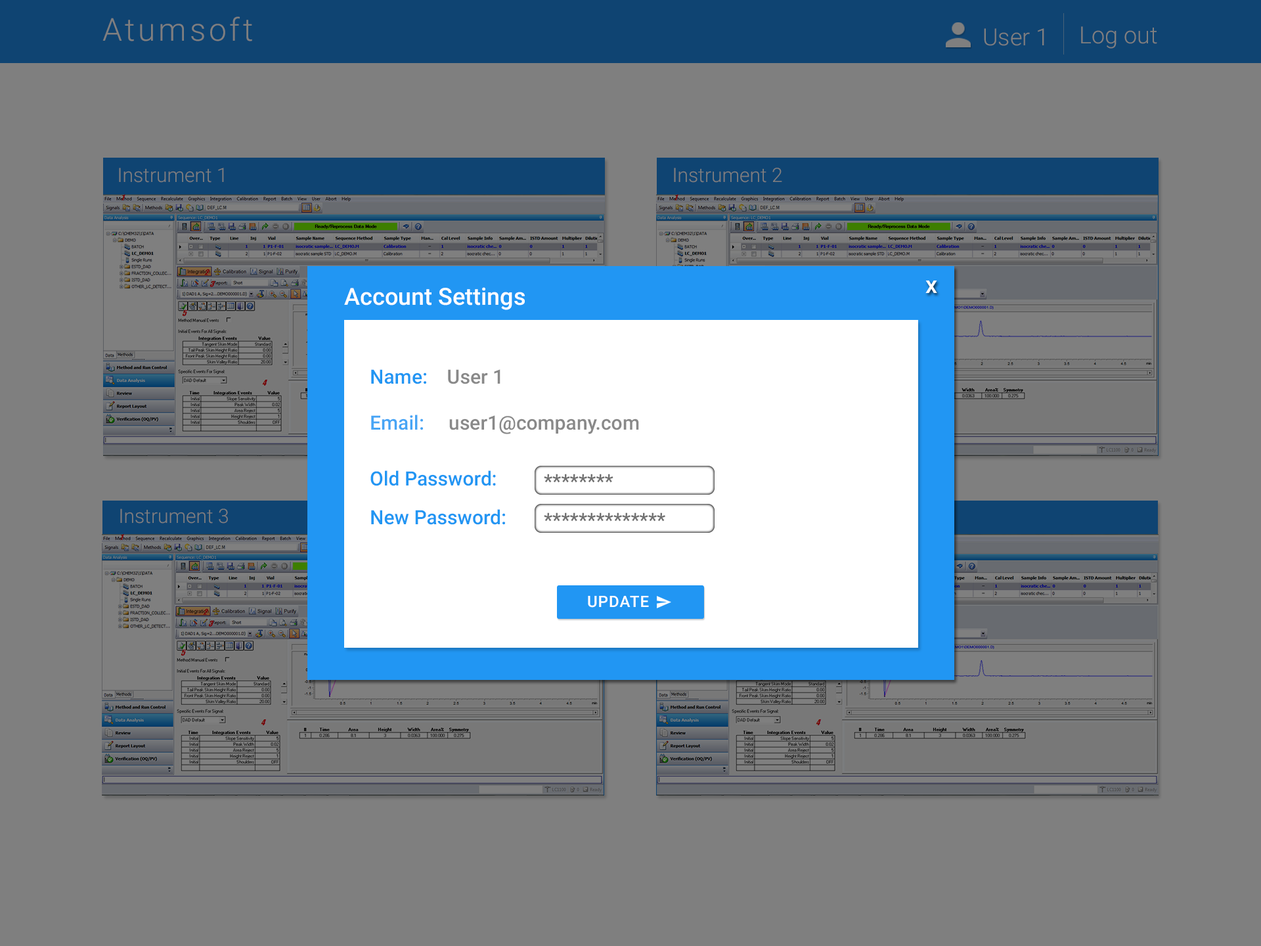
<style>
.page{position:relative;width:1261px;height:946px;background:#7f7f7f}
.page>*{position:absolute;margin:0}
.t1{font:31.5px "Roboto-Light";letter-spacing:0.1em;color:#7f7f7f}
.t2{font:23.6px "Roboto-Light";color:#7f7f7f}
.t3{font:19.7px "Roboto-Light";color:#7f7f7f}
.t4{font:23.6px "Roboto-Medium";color:#ffffff}
.t5{font:19.7px "Roboto-Medium";color:#898989}
.t6{font:19.7px "Roboto-Medium";color:#2196f3}
.t7{font:19.7px "Roboto-Medium";color:#47a5f5}
.t8{font:19.7px "Roboto-Medium";color:#707070}
.t9{font:15.8px "Roboto-Medium";letter-spacing:0.041em;color:#ffffff}
</style>
<div class="page">
<p class="t1" style="left:102px;top:16px;width:150px;height:25px">Atumsoft</p>
<p class="t2" style="left:984px;top:28px;width:60px;height:18px">User 1</p>
<p class="t2" style="left:1081px;top:26px;width:76px;height:23px">Log out</p>
<p class="t3" style="left:119px;top:167px;width:105px;height:16px">Instrument 1</p>
<p class="t3" style="left:674px;top:167px;width:108px;height:16px">Instrument 2</p>
<p class="t4" style="left:925px;top:280px;width:12px;height:13px">x</p>
<p class="t4" style="left:344px;top:287px;width:181px;height:23px">Account Settings</p>
<p class="t5" style="left:371px;top:369px;width:129px;height:15px"><span class="t6">Name:    </span>User 1</p>
<p class="t5" style="left:371px;top:414px;width:268px;height:20px"><span class="t7">Email:     </span>user1@company.com</p>
<p class="t6" style="left:370px;top:470px;width:126px;height:16px">Old Password:</p>
<p class="t8" style="left:544px;top:474px;width:69px;height:9px">********</p>
<p class="t3" style="left:120px;top:508px;width:108px;height:15px">Instrument 3</p>
<p class="t6" style="left:371px;top:509px;width:134px;height:16px">New Password:</p>
<p class="t8" style="left:544px;top:512px;width:121px;height:9px">**************</p>
<p class="t9" style="left:588px;top:596px;width:61px;height:11px">UPDATE</p>
</div>
